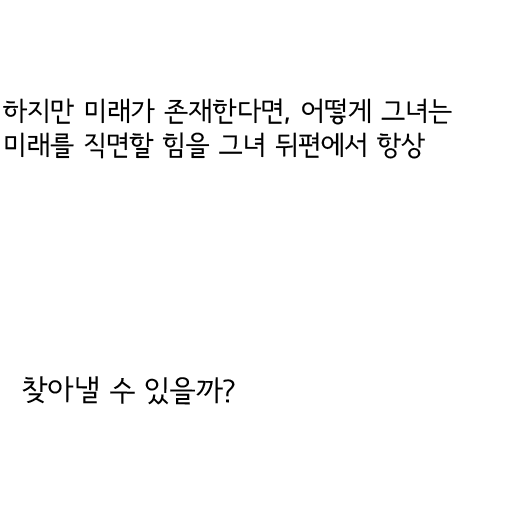
<style>
.page{position:relative;width:512px;height:512px;background:#ffffff}
.page>*{position:absolute;margin:0}
.t1{font:27px/34px "SeoulNamsanM";color:#000000}
.t2{font:29px "SeoulNamsanM";color:#000000}
</style>
<div class="page">
<p class="t1" style="left:3px;top:98px;width:449px;height:61px">하지만 미래가 존재한다면, 어떻게 그녀는<br>미래를 직면할 힘을 그녀 뒤편에서 항상</p>
<p class="t2" style="left:22px;top:376px;width:213px;height:29px">찾아낼 수 있을까?</p>
</div>
